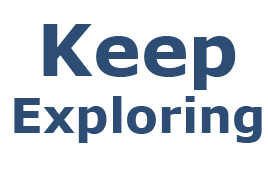
<style>
.page{position:relative;width:268px;height:190px;background:#ffffff}
.page>*{position:absolute;margin:0}
.t1{font:48px "Verdana-Bold";color:#2d4d74}
.t2{font:72px "Verdana-Bold";color:#2d4d74}
</style>
<div class="page">
<p class="t1" style="left:14px;top:24px;width:248px;height:119px;text-align:center"><span class="t2">Keep<br></span>Exploring</p>
</div>
